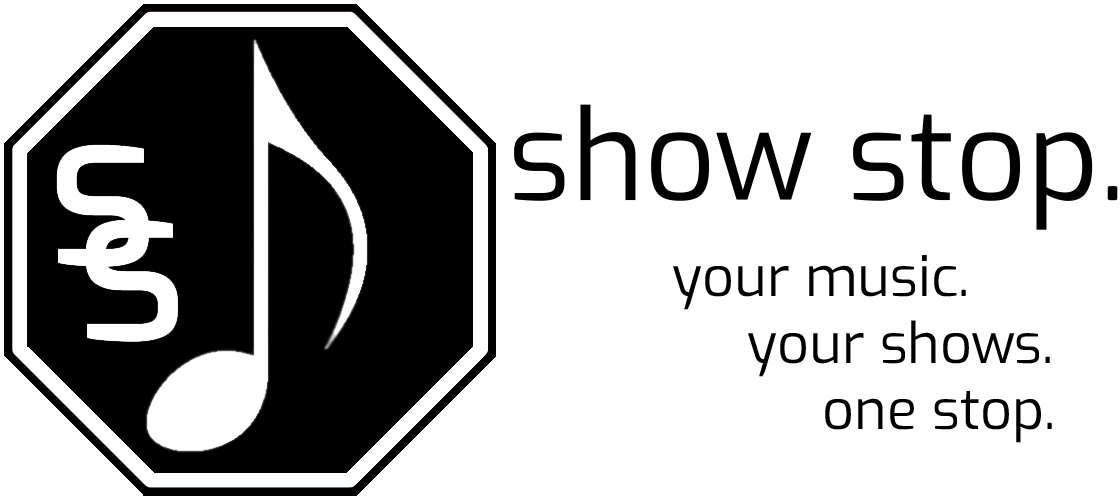
<style>
.page{position:relative;width:1120px;height:500px;background:#ffffff}
.page>*{position:absolute;margin:0}
.t1{font:125px "Exo-Regular";color:#000000}
.t2{font:55.6px "Exo-Regular";color:#000000}
</style>
<div class="page">
<p class="t1" style="left:514px;top:104px;width:604px;height:126px">show stop.</p>
<p class="t2" style="left:673px;top:255px;width:379px;height:188px">your music.<br>     your shows.<br>          one stop.</p>
</div>
